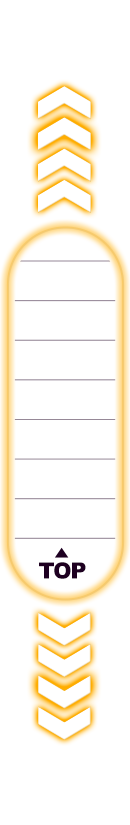
<style>
.page{position:relative;width:130px;height:825px;background:#ffffff}
.page>*{position:absolute;margin:0}
.t1{font:22.2px "Arial-Black";letter-spacing:-0.05em;color:#1e0021}
</style>
<div class="page">
<p class="t1" style="left:39px;top:562px;width:47px;height:17px">TOP</p>
</div>
